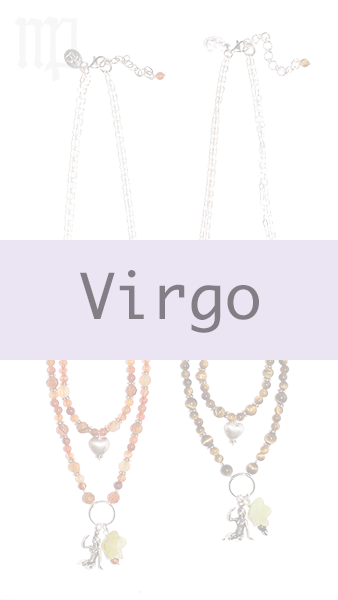
<style>
.page{position:relative;width:338px;height:600px;background:#ffffff}
.page>*{position:absolute;margin:0}
.t1{font:61px "Ayuthaya";color:#817e85}
</style>
<div class="page">
<p class="t1" style="left:80px;top:270px;width:179px;height:63px">Virgo</p>
</div>
